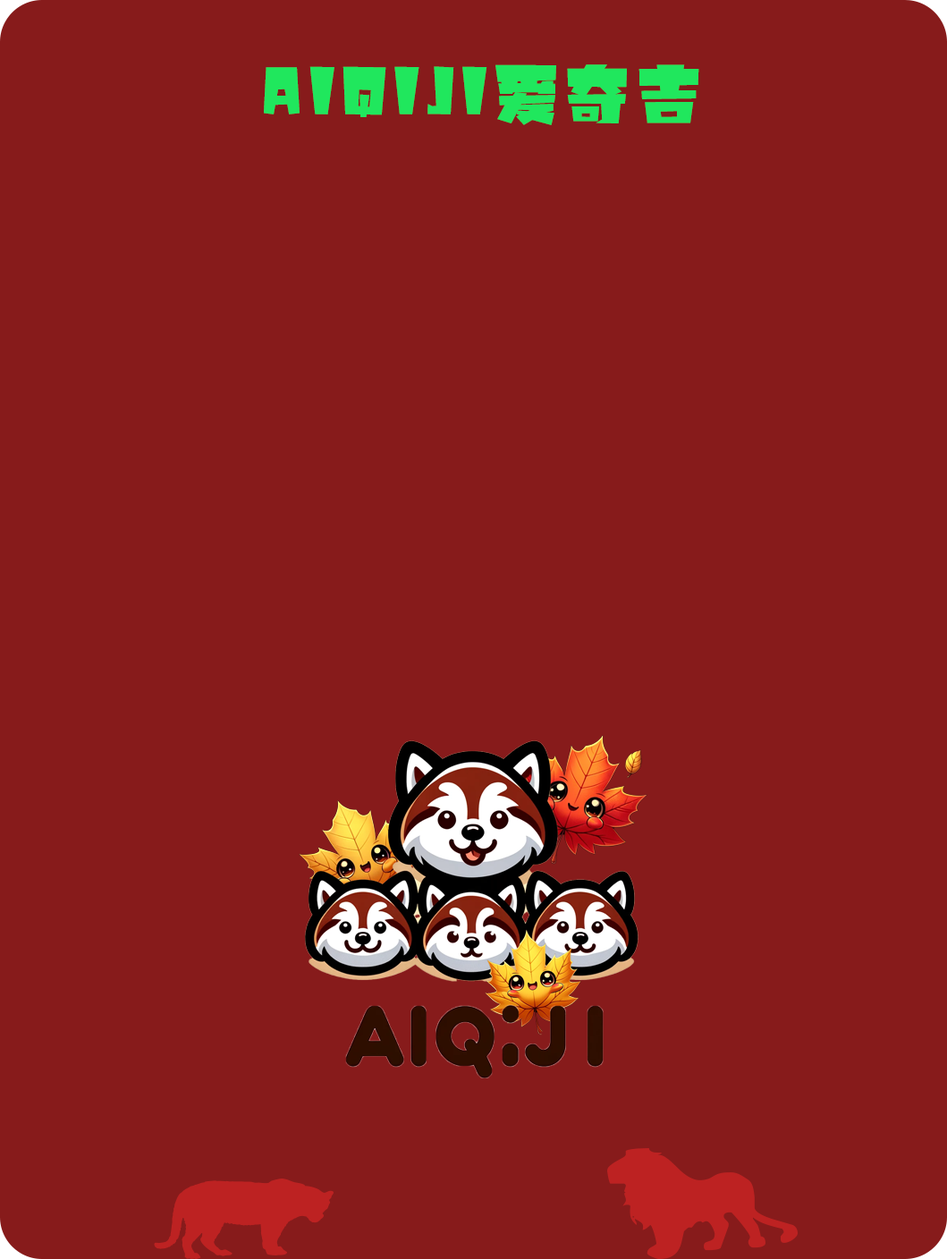
<style>
.page{position:relative;width:947px;height:1259px;background:#871b1b}
.page>*{position:absolute;margin:0}
.t1{font:67.1px "zihun18hao-xiaokonglong";letter-spacing:0.04em;color:#20e75d}
</style>
<div class="page">
<p class="t1" style="left:264px;top:64px;width:435px;height:61px">AIQIJI爱奇吉</p>
</div>
